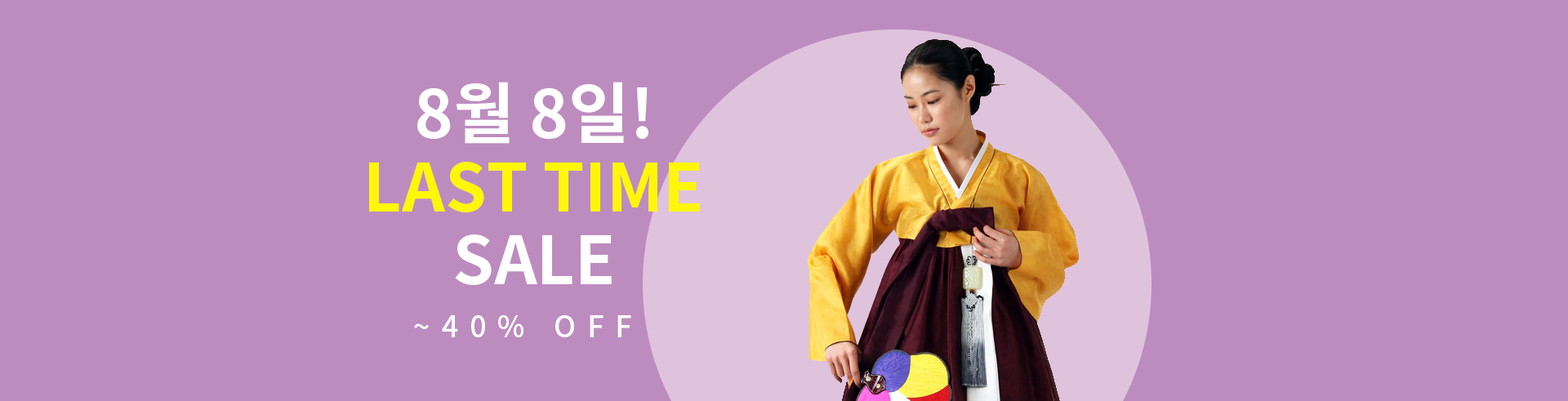
<style>
.page{position:relative;width:1568px;height:401px;background:#bd8cbf}
.page>*{position:absolute;margin:0}
.t1{font:66.6px/72.9px "NotoSansKR-Bold";color:#fff608}
.t2{font:66.6px/72.9px "NotoSansKR-Bold";color:#ffffff}
.t3{font:29.4px "NotoSansKR-Medium";letter-spacing:0.38em;color:#ffffff}
</style>
<div class="page">
<p class="t1" style="left:369px;top:82px;width:331px;height:203px;text-align:center"><span class="t2">8월 8일!<br></span>LAST TIME<br><span class="t2">SALE</span></p>
<p class="t3" style="left:414px;top:315px;width:217px;height:22px">~40% OFF</p>
</div>
